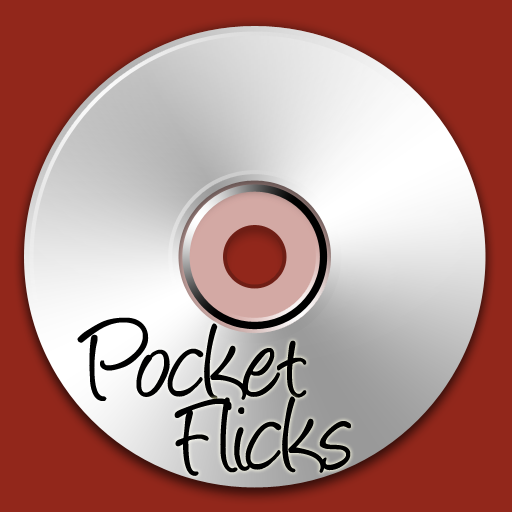
<style>
.page{position:relative;width:512px;height:512px;background:#92271b}
.page>*{position:absolute;margin:0}
.t1{font:121px "Angelina";letter-spacing:-0.025em;color:#000000}
</style>
<div class="page">
<p class="t1" style="left:77px;top:317px;width:230px;height:84px">Pocket</p>
<p class="t1" style="left:174px;top:396px;width:177px;height:80px">Flicks</p>
</div>
